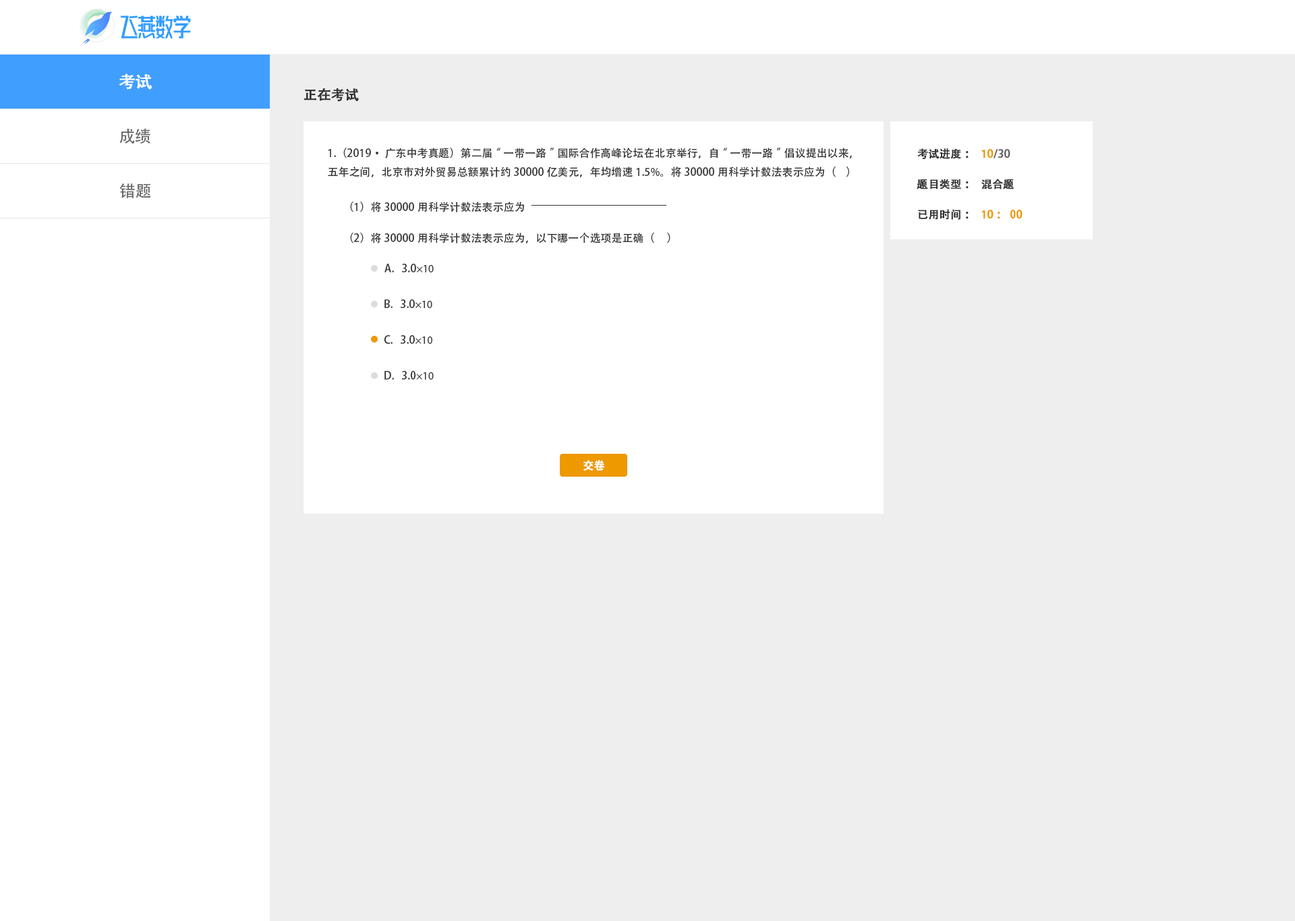
<style>
.page{position:relative;width:1295px;height:921px;background:#eeeeee}
.page>*{position:absolute;margin:0}
.t1{font:16.2px "AdobeHeitiStd-Regular";color:#ffffff;font-weight:bold}
.t2{font:13.5px "AdobeHeitiStd-Regular";color:#333333;font-weight:bold}
.t3{font:16.2px "AdobeHeitiStd-Regular";color:#666666}
.t4{font:10.8px "AdobeHeitiStd-Regular";color:#333333}
.t5{font:10.8px "AdobeHeitiStd-Regular";color:#333333;font-weight:bold}
.t6{font:10.8px "AdobeHeitiStd-Regular";color:#666666;font-weight:bold}
.t7{font:10.8px "AdobeHeitiStd-Regular";color:#ee9900;font-weight:bold}
.t8{font:10.8px "MyriadPro-Regular";color:#333333}
.t9{font:10.8px "AdobeHeitiStd-Regular";color:#ffffff;font-weight:bold}
</style>
<div class="page">
<p class="t1" style="left:119px;top:73px;width:33px;height:17px">考试</p>
<p class="t2" style="left:304px;top:88px;width:55px;height:14px">正在考试</p>
<p class="t3" style="left:119px;top:128px;width:31px;height:16px">成绩</p>
<p class="t4" style="left:328px;top:148px;width:524px;height:29px">1.（2019·广东中考真题）第二届“一带一路”国际合作高峰论坛在北京举行，自“一带一路”倡议提出以来，五年之间，北京市对外贸易总额累计约30000亿美元，年均增速1.5%。将30000用科学计数法表示应为（    ）</p>
<p class="t5" style="left:917px;top:148px;width:51px;height:12px">考试进度：</p>
<p class="t6" style="left:981px;top:149px;width:29px;height:9px"><span class="t7">１0</span>/30</p>
<p class="t3" style="left:119px;top:183px;width:32px;height:15px">错题</p>
<p class="t5" style="left:916px;top:179px;width:52px;height:10px">题目类型：</p>
<p class="t5" style="left:981px;top:179px;width:33px;height:10px">混合题</p>
<p class="t4" style="left:350px;top:202px;width:174px;height:10px">（1）将30000用科学计数法表示应为</p>
<p class="t5" style="left:918px;top:209px;width:50px;height:11px">已用时间：</p>
<p class="t7" style="left:981px;top:210px;width:41px;height:9px">１0：00</p>
<p class="t4" style="left:350px;top:233px;width:320px;height:10px">（2）将30000用科学计数法表示应为，以下哪一个选项是正确（     ）</p>
<p class="t4" style="left:384px;top:264px;width:50px;height:8px">A.   3.0<span class="t8">×10</span></p>
<p class="t4" style="left:384px;top:299px;width:48px;height:9px">B.   3.0<span class="t8">×10</span></p>
<p class="t4" style="left:384px;top:335px;width:48px;height:9px">C.   3.0<span class="t8">×10</span></p>
<p class="t4" style="left:384px;top:371px;width:50px;height:9px">D.   3.0<span class="t8">×10</span></p>
<p class="t9" style="left:583px;top:460px;width:22px;height:11px">交卷</p>
</div>
